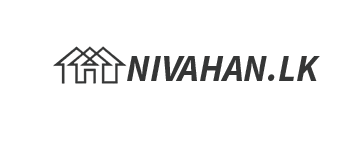
<style>
.page{position:relative;width:358px;height:141px;background:#ffffff}
.page>*{position:absolute;margin:0}
.t1{font:38px "SourceSansPro-BoldIt";color:#353636}
</style>
<div class="page">
<p class="t1" style="left:127px;top:56px;width:193px;height:25px">NIVAHAN.LK</p>
</div>
